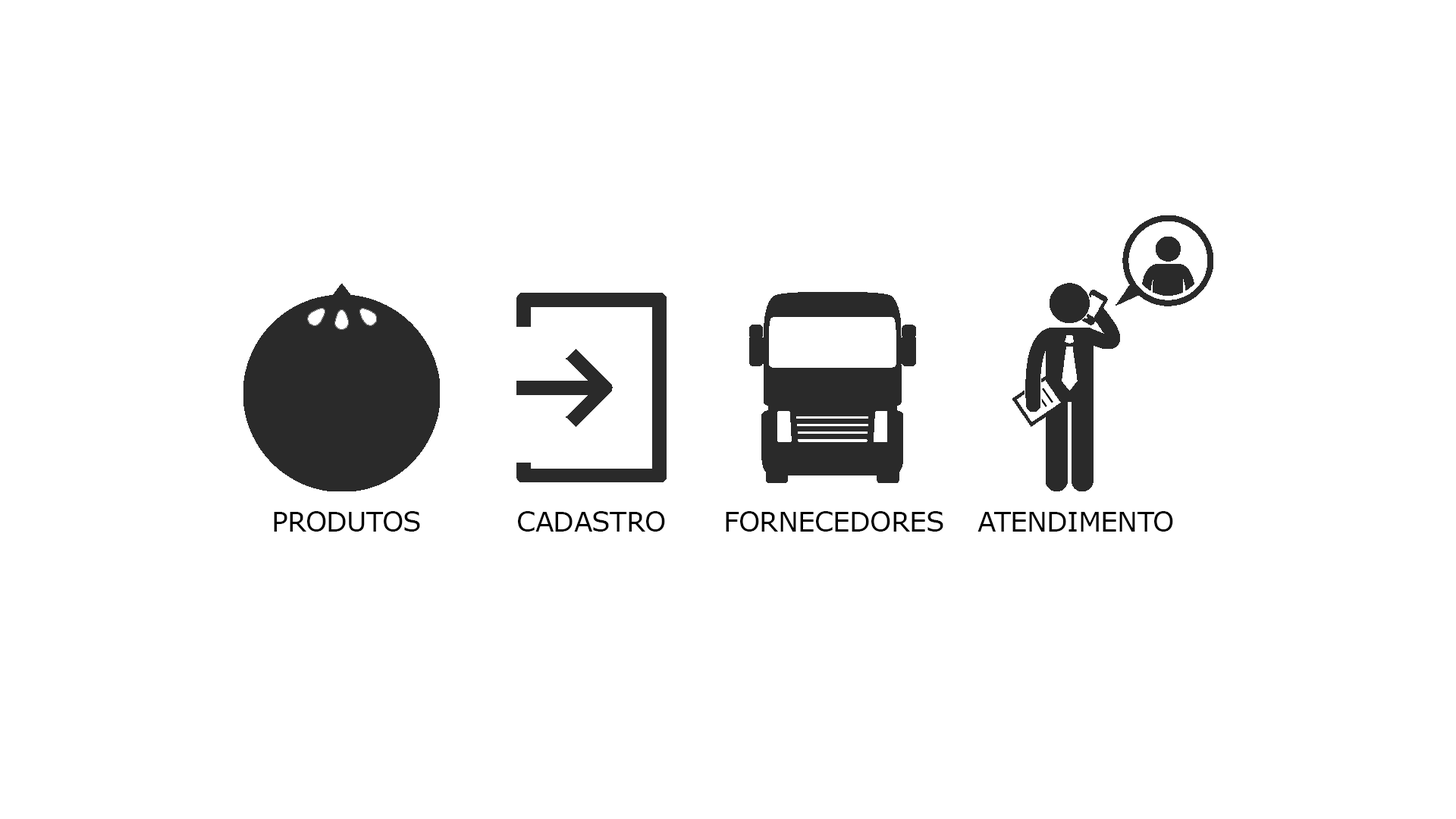
<style>
.page{position:relative;width:1456px;height:819px;background:#ffffff}
.page>*{position:absolute;margin:0}
.t1{font:27.3px "Verdana";letter-spacing:-0.02em;color:#000000}
</style>
<div class="page">
<p class="t1" style="left:274px;top:511px;width:146px;height:21px">PRODUTOS</p>
<p class="t1" style="left:518px;top:511px;width:147px;height:21px">CADASTRO</p>
<p class="t1" style="left:726px;top:511px;width:217px;height:21px">FORNECEDORES</p>
<p class="t1" style="left:977px;top:511px;width:196px;height:21px">ATENDIMENTO</p>
</div>
